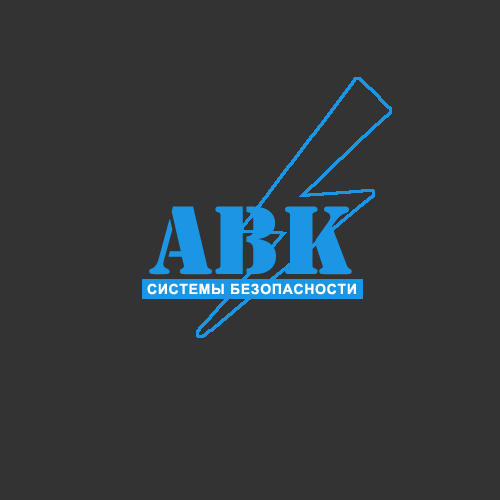
<style>
.page{position:relative;width:500px;height:500px;background:#333333}
.page>*{position:absolute;margin:0}
.t1{font:90px "StencilStd";color:#1a96e5}
.t2{font:14px "Arial-BoldMT";letter-spacing:0.05em;color:#ffffff}
</style>
<div class="page">
<p class="t1" style="left:149px;top:206px;width:203px;height:69px">abk</p>
<p class="t2" style="left:147px;top:283px;width:209px;height:12px">СИСТЕМЫ БЕЗОПАСНОСТИ</p>
</div>
